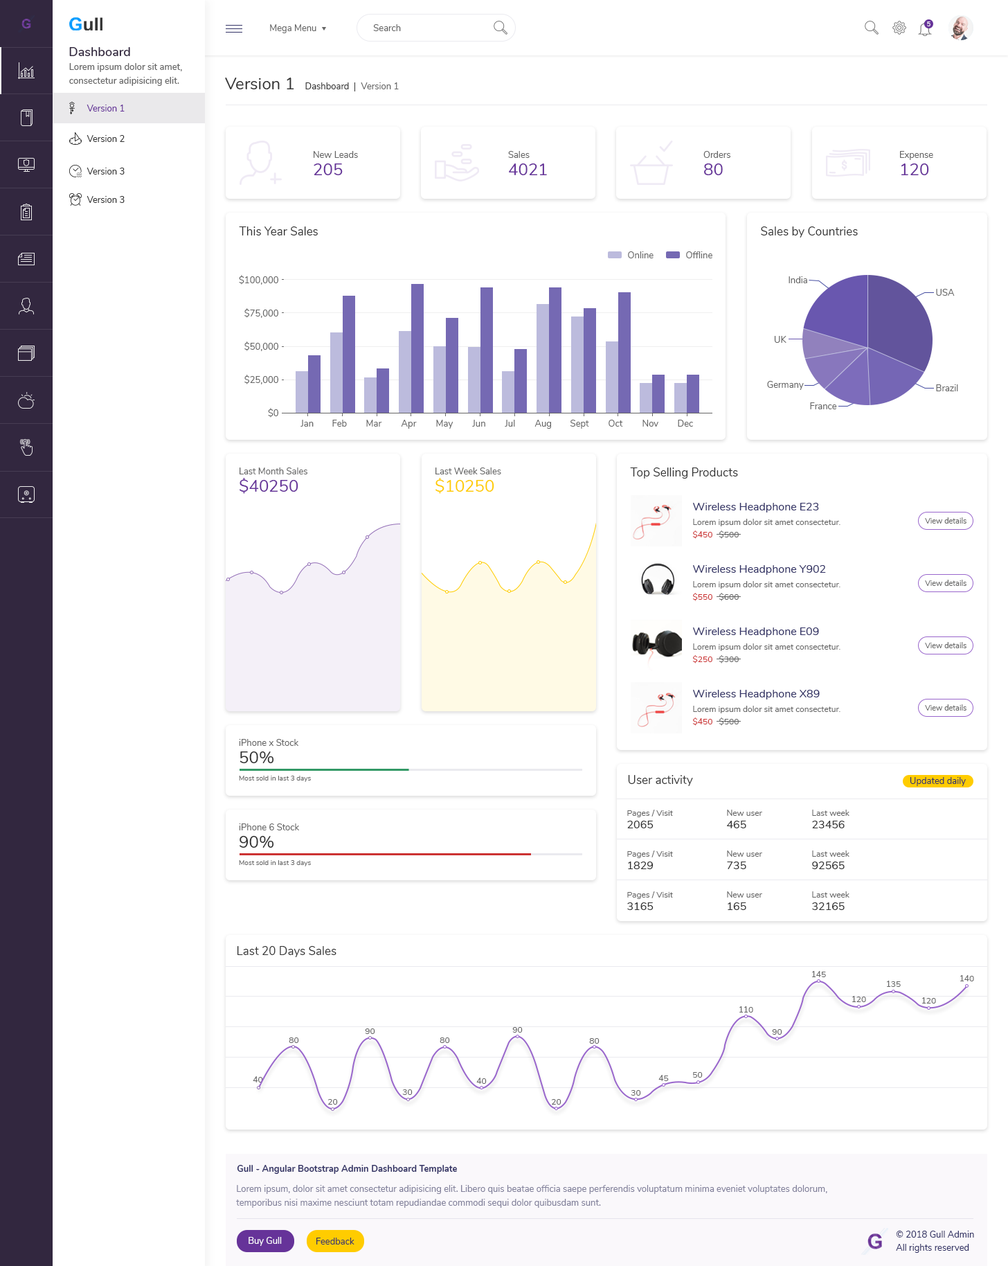
<style>
.page{position:relative;width:1008px;height:1266px;background:#ffffff}
.page>*{position:absolute;margin:0}
.t1{font:9px "Nunito-Regular";color:#666666}
.t2{font:6.2px "Nunito-SemiBold";color:#ffffff}
.t3{font:12.5px "Nunito-SemiBold";color:#32273f}
.t4{font:9px/13.8px "Nunito-SemiBold";color:#666666}
.t5{font:16.6px "Nunito-Regular";color:#333333}
.t6{font:9px "Nunito-Regular";color:#333333}
.t7{font:9px "Nunito-Regular";color:#663399}
.t8{font:16.6px "Nunito-Regular";color:#663399}
.t9{font:11.8px "Nunito-Regular";color:#333333}
.t10{font:16.6px "Nunito-Regular";color:#ffcc00}
.t11{font:11.1px "Nunito-Regular";color:#333366}
.t12{font:8.3px "Nunito-Regular";color:#666666}
.t13{font:7.6px "Nunito-Regular";color:#666666}
.t14{font:8.3px "Nunito-Regular";color:#cc3333}
.t15{font:6.9px "Nunito-Regular";color:#666666}
.t16{font:9px "Nunito-Regular";color:#333366}
.t17{font:11.1px "Nunito-Regular";color:#333333}
.t18{font:9px "Nunito-Bold";color:#333366}
.t19{font:9px/13.8px "Nunito-Regular";color:#82819b}
.t20{font:9px "Nunito-Regular";color:#ffffff}
</style>
<div class="page">
<p class="t1" style="left:270px;top:24px;width:46px;height:9px">Mega Menu</p>
<p class="t1" style="left:373px;top:24px;width:28px;height:7px">Search</p>
<p class="t2" style="left:927px;top:21px;width:3px;height:5px">5</p>
<p class="t3" style="left:69px;top:47px;width:61px;height:9px">Dashboard</p>
<p class="t4" style="left:69px;top:63px;width:113px;height:23px">Lorem ipsum dolor sit amet, <br>consectetur adipisicing elit.</p>
<p class="t5" style="left:225px;top:78px;width:69px;height:11px">Version 1</p>
<p class="t6" style="left:305px;top:82px;width:44px;height:7px">Dashboard</p>
<p class="t1" style="left:361px;top:82px;width:38px;height:7px">Version 1</p>
<p class="t7" style="left:87px;top:105px;width:38px;height:6px">Version 1</p>
<p class="t6" style="left:87px;top:135px;width:38px;height:7px">Version 2</p>
<p class="t1" style="left:314px;top:151px;width:44px;height:7px">New Leads</p>
<p class="t1" style="left:508px;top:151px;width:22px;height:7px">Sales</p>
<p class="t1" style="left:703px;top:151px;width:27px;height:7px">Orders</p>
<p class="t1" style="left:900px;top:151px;width:33px;height:9px">Expense</p>
<p class="t6" style="left:87px;top:168px;width:38px;height:6px">Version 3</p>
<p class="t8" style="left:314px;top:163px;width:29px;height:12px">205</p>
<p class="t8" style="left:509px;top:163px;width:38px;height:12px">4021</p>
<p class="t8" style="left:704px;top:163px;width:19px;height:12px">80</p>
<p class="t8" style="left:901px;top:163px;width:28px;height:12px">120</p>
<p class="t6" style="left:87px;top:196px;width:38px;height:7px">Version 3</p>
<p class="t9" style="left:239px;top:226px;width:79px;height:9px">This Year Sales</p>
<p class="t9" style="left:761px;top:226px;width:97px;height:11px">Sales by Countries</p>
<p class="t1" style="left:628px;top:251px;width:26px;height:7px">Online</p>
<p class="t1" style="left:686px;top:251px;width:26px;height:7px">Offline</p>
<p class="t1" style="left:239px;top:275px;width:39px;height:10px">$100,000</p>
<p class="t1" style="left:789px;top:276px;width:18px;height:7px">India</p>
<p class="t1" style="left:936px;top:289px;width:19px;height:7px">USA</p>
<p class="t1" style="left:244px;top:308px;width:34px;height:10px">$75,000</p>
<p class="t1" style="left:244px;top:341px;width:34px;height:10px">$50,000</p>
<p class="t1" style="left:774px;top:336px;width:12px;height:7px">UK</p>
<p class="t1" style="left:244px;top:375px;width:34px;height:9px">$25,000</p>
<p class="t1" style="left:767px;top:381px;width:37px;height:9px">Germany</p>
<p class="t1" style="left:936px;top:384px;width:22px;height:7px">Brazil</p>
<p class="t1" style="left:268px;top:408px;width:10px;height:9px">$0</p>
<p class="t1" style="left:810px;top:402px;width:27px;height:7px">France</p>
<p class="t1" style="left:300px;top:420px;width:14px;height:6px">Jan</p>
<p class="t1" style="left:332px;top:420px;width:15px;height:6px">Feb</p>
<p class="t1" style="left:366px;top:420px;width:16px;height:6px">Mar</p>
<p class="t1" style="left:401px;top:420px;width:16px;height:9px">Apr</p>
<p class="t1" style="left:436px;top:420px;width:17px;height:9px">May</p>
<p class="t1" style="left:472px;top:420px;width:13px;height:6px">Jun</p>
<p class="t1" style="left:505px;top:420px;width:10px;height:6px">Jul</p>
<p class="t1" style="left:534px;top:420px;width:17px;height:9px">Aug</p>
<p class="t1" style="left:570px;top:420px;width:19px;height:9px">Sept</p>
<p class="t1" style="left:609px;top:420px;width:14px;height:6px">Oct</p>
<p class="t1" style="left:642px;top:420px;width:16px;height:6px">Nov</p>
<p class="t1" style="left:678px;top:420px;width:15px;height:6px">Dec</p>
<p class="t1" style="left:240px;top:467px;width:67px;height:7px">Last Month Sales</p>
<p class="t1" style="left:435px;top:467px;width:66px;height:7px">Last Week Sales</p>
<p class="t9" style="left:630px;top:467px;width:108px;height:11px">Top Selling Products</p>
<p class="t8" style="left:240px;top:478px;width:58px;height:16px">$40250</p>
<p class="t10" style="left:435px;top:478px;width:59px;height:16px">$10250</p>
<p class="t11" style="left:693px;top:503px;width:126px;height:9px">Wireless Headphone E23</p>
<p class="t12" style="left:693px;top:519px;width:147px;height:7px">Lorem ipsum dolor sit amet consectetur.</p>
<p class="t13" style="left:925px;top:517px;width:41px;height:6px">View details</p>
<p class="t14" style="left:692px;top:530px;width:20px;height:9px">$450</p>
<p class="t12" style="left:719px;top:530px;width:20px;height:9px">$500</p>
<p class="t11" style="left:693px;top:565px;width:133px;height:10px">Wireless Headphone Y902</p>
<p class="t12" style="left:693px;top:581px;width:147px;height:7px">Lorem ipsum dolor sit amet consectetur.</p>
<p class="t13" style="left:925px;top:579px;width:41px;height:7px">View details</p>
<p class="t14" style="left:692px;top:593px;width:20px;height:8px">$550</p>
<p class="t12" style="left:719px;top:593px;width:20px;height:8px">$600</p>
<p class="t11" style="left:693px;top:627px;width:126px;height:10px">Wireless Headphone E09</p>
<p class="t13" style="left:925px;top:642px;width:41px;height:6px">View details</p>
<p class="t12" style="left:693px;top:643px;width:147px;height:8px">Lorem ipsum dolor sit amet consectetur.</p>
<p class="t14" style="left:692px;top:655px;width:20px;height:8px">$250</p>
<p class="t12" style="left:719px;top:655px;width:20px;height:8px">$300</p>
<p class="t11" style="left:693px;top:690px;width:127px;height:9px">Wireless Headphone X89</p>
<p class="t12" style="left:693px;top:705px;width:147px;height:8px">Lorem ipsum dolor sit amet consectetur.</p>
<p class="t13" style="left:925px;top:704px;width:41px;height:6px">View details</p>
<p class="t14" style="left:692px;top:717px;width:20px;height:9px">$450</p>
<p class="t12" style="left:719px;top:717px;width:20px;height:9px">$500</p>
<p class="t1" style="left:239px;top:739px;width:59px;height:7px">iPhone x Stock</p>
<p class="t5" style="left:240px;top:751px;width:34px;height:12px">50%</p>
<p class="t15" style="left:239px;top:775px;width:72px;height:7px">Most sold in last 3 days</p>
<p class="t9" style="left:628px;top:775px;width:65px;height:11px">User activity</p>
<p class="t16" style="left:910px;top:777px;width:56px;height:9px">Updated daily</p>
<p class="t12" style="left:627px;top:809px;width:46px;height:8px">Pages / Visit</p>
<p class="t12" style="left:727px;top:809px;width:35px;height:7px">New user</p>
<p class="t12" style="left:812px;top:809px;width:37px;height:7px">Last week</p>
<p class="t17" style="left:627px;top:820px;width:27px;height:8px">2065</p>
<p class="t17" style="left:727px;top:820px;width:19px;height:8px">465</p>
<p class="t17" style="left:812px;top:820px;width:33px;height:8px">23456</p>
<p class="t1" style="left:239px;top:823px;width:60px;height:7px">iPhone 6 Stock</p>
<p class="t5" style="left:240px;top:836px;width:34px;height:11px">90%</p>
<p class="t12" style="left:627px;top:850px;width:46px;height:8px">Pages / Visit</p>
<p class="t12" style="left:727px;top:850px;width:35px;height:6px">New user</p>
<p class="t12" style="left:812px;top:850px;width:37px;height:6px">Last week</p>
<p class="t15" style="left:239px;top:860px;width:72px;height:6px">Most sold in last 3 days</p>
<p class="t17" style="left:628px;top:861px;width:26px;height:8px">1829</p>
<p class="t17" style="left:727px;top:861px;width:19px;height:8px">735</p>
<p class="t17" style="left:812px;top:861px;width:33px;height:8px">92565</p>
<p class="t12" style="left:627px;top:891px;width:46px;height:8px">Pages / Visit</p>
<p class="t12" style="left:727px;top:891px;width:35px;height:6px">New user</p>
<p class="t12" style="left:812px;top:891px;width:37px;height:6px">Last week</p>
<p class="t17" style="left:627px;top:902px;width:27px;height:8px">3165</p>
<p class="t17" style="left:728px;top:902px;width:18px;height:8px">165</p>
<p class="t17" style="left:812px;top:902px;width:33px;height:8px">32165</p>
<p class="t9" style="left:237px;top:946px;width:99px;height:11px">Last 20 Days Sales</p>
<p class="t12" style="left:812px;top:971px;width:14px;height:6px">145</p>
<p class="t12" style="left:960px;top:975px;width:14px;height:6px">140</p>
<p class="t12" style="left:887px;top:980px;width:14px;height:7px">135</p>
<p class="t12" style="left:852px;top:996px;width:14px;height:6px">120</p>
<p class="t12" style="left:922px;top:997px;width:14px;height:6px">120</p>
<p class="t12" style="left:739px;top:1006px;width:14px;height:6px">110</p>
<p class="t12" style="left:289px;top:1037px;width:10px;height:6px">80</p>
<p class="t12" style="left:365px;top:1028px;width:10px;height:6px">90</p>
<p class="t12" style="left:440px;top:1037px;width:10px;height:6px">80</p>
<p class="t12" style="left:512px;top:1027px;width:11px;height:5px">90</p>
<p class="t12" style="left:589px;top:1038px;width:11px;height:5px">80</p>
<p class="t12" style="left:772px;top:1029px;width:10px;height:5px">90</p>
<p class="t12" style="left:693px;top:1072px;width:10px;height:5px">50</p>
<p class="t12" style="left:253px;top:1076px;width:10px;height:6px">40</p>
<p class="t12" style="left:476px;top:1077px;width:11px;height:6px">40</p>
<p class="t12" style="left:658px;top:1074px;width:11px;height:7px">45</p>
<p class="t12" style="left:402px;top:1089px;width:11px;height:6px">30</p>
<p class="t12" style="left:631px;top:1090px;width:10px;height:5px">30</p>
<p class="t12" style="left:327px;top:1099px;width:11px;height:5px">20</p>
<p class="t12" style="left:551px;top:1099px;width:10px;height:5px">20</p>
<p class="t18" style="left:237px;top:1164px;width:220px;height:9px">Gull - Angular Bootstrap Admin Dashboard Template</p>
<p class="t19" style="left:236px;top:1185px;width:591px;height:22px">Lorem ipsum, dolor sit amet consectetur adipisicing elit. Libero quis beatae officia saepe perferendis voluptatum minima eveniet voluptates dolorum, <br>temporibus nisi maxime nesciunt totam repudiandae commodi sequi dolor quibusdam sunt.</p>
<p class="t20" style="left:249px;top:1236px;width:33px;height:9px">Buy Gull</p>
<p class="t16" style="left:316px;top:1237px;width:38px;height:7px">Feedback</p>
<p class="t16" style="left:896px;top:1230px;width:78px;height:7px">© 2018 Gull Admin</p>
<p class="t16" style="left:896px;top:1243px;width:73px;height:9px">All rights reserved</p>
</div>
